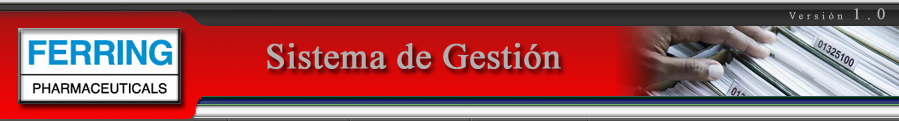
<style>
.page{position:relative;width:899px;height:121px}
.page>*{position:absolute;margin:0}
.t1{font:10px "TimesNewRomanPSMT";letter-spacing:0.36em;color:#b1b0b0;font-weight:bold}
.t2{font:15.8px "TimesNewRomanPSMT";letter-spacing:0.36em;color:#b1b0b0;font-weight:bold}
.t3{font:36px "TimesNewRomanPSMT";color:#b1b0b0;font-weight:bold}
</style>
<div class="page">
<p class="t1" style="left:789px;top:8px;width:96px;height:12px">Versión <span class="t2">1.0</span></p>
<p class="t3" style="left:267px;top:43px;width:294px;height:26px">Sistema de Gestión</p>
</div>
